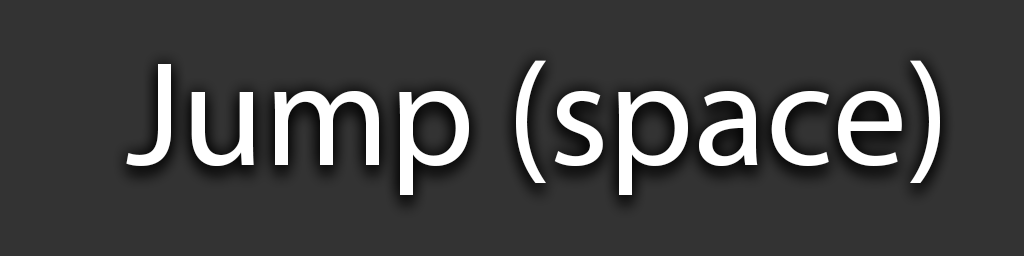
<style>
.page{position:relative;width:1024px;height:256px;background:#333333}
.page>*{position:absolute;margin:0}
.t1{font:150px "MyriadPro-Regular";color:#ffffff}
</style>
<div class="page">
<p class="t1" style="left:126px;top:60px;width:814px;height:135px">Jump (space)</p>
</div>
